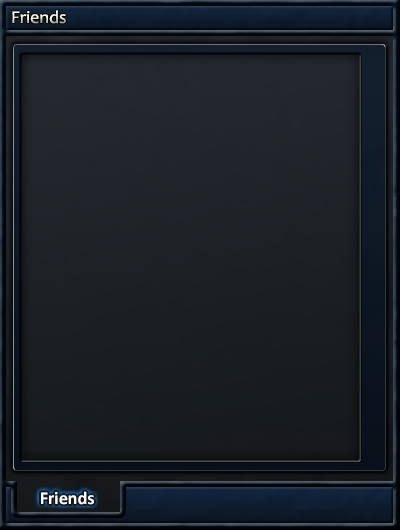
<style>
.page{position:relative;width:400px;height:530px}
.page>*{position:absolute;margin:0}
.t1{font:18px "Candara"}
.t2{font:18px "Calibri-Bold";color:#ffffff}
</style>
<div class="page">
<p class="t1" style="left:12px;top:10px;width:54px;height:14px">Friends</p>
<p class="t2" style="left:41px;top:491px;width:53px;height:14px">Friends</p>
</div>
